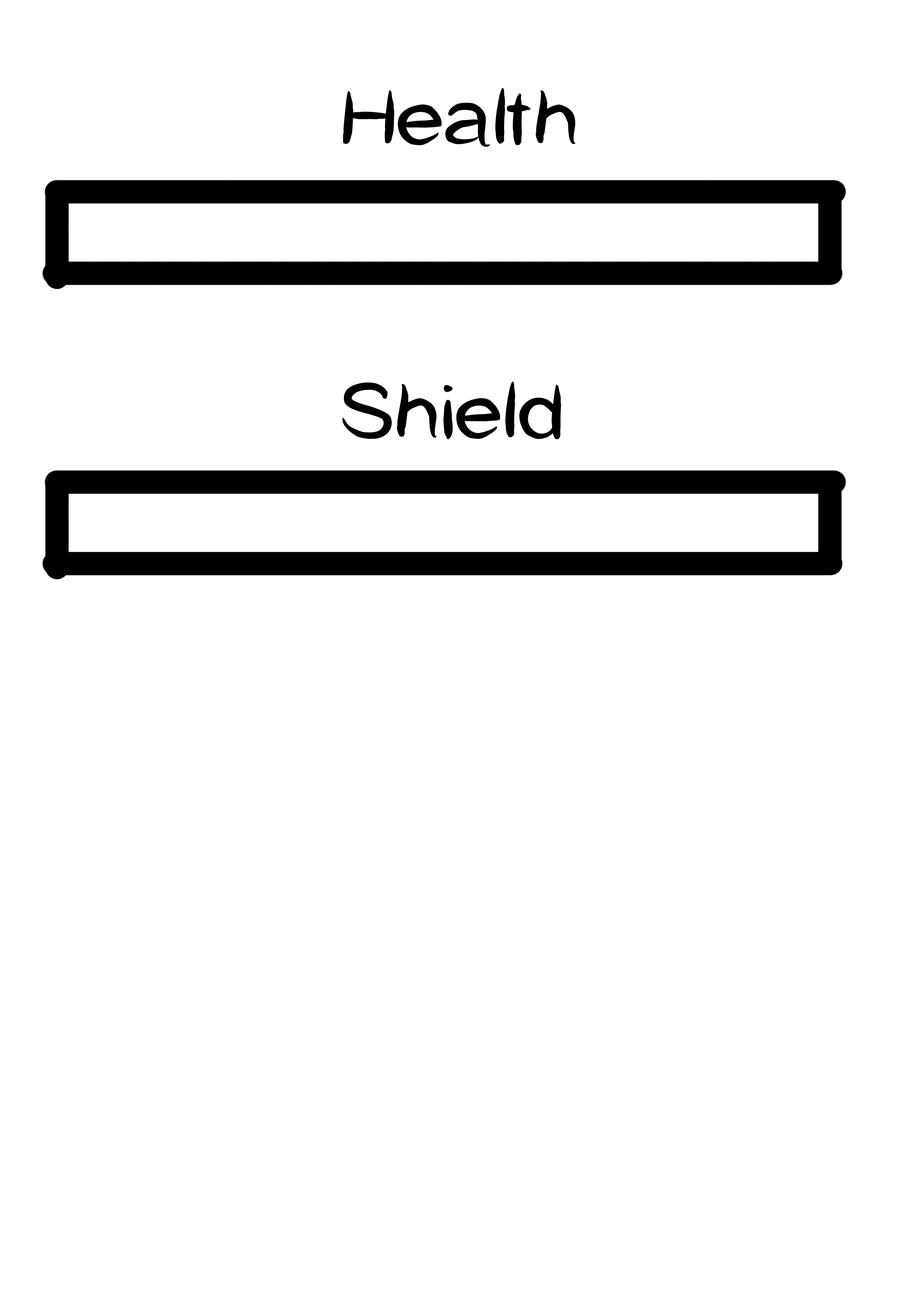
<style>
.page{position:relative;width:918px;height:1299px;background:#ffffff}
.page>*{position:absolute;margin:0}
.t1{font:74px "CatCafe";color:#000000;scale:1.2 1}
</style>
<div class="page">
<p class="t1" style="left:343px;top:88px;width:233px;height:59px">Health</p>
<p class="t1" style="left:342px;top:381px;width:219px;height:58px">Shield</p>
</div>
